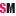
<style>
.page{position:relative;width:16px;height:16px;background:#ffffff}
.page>*{position:absolute;margin:0}
.t1{font:12.5px "Impact";color:#f40d5e}
.t2{font:12.5px "Impact";color:#191819}
</style>
<div class="page">
<p class="t1" style="left:0px;top:3px;width:15px;height:10px">S<span class="t2">M</span></p>
</div>
